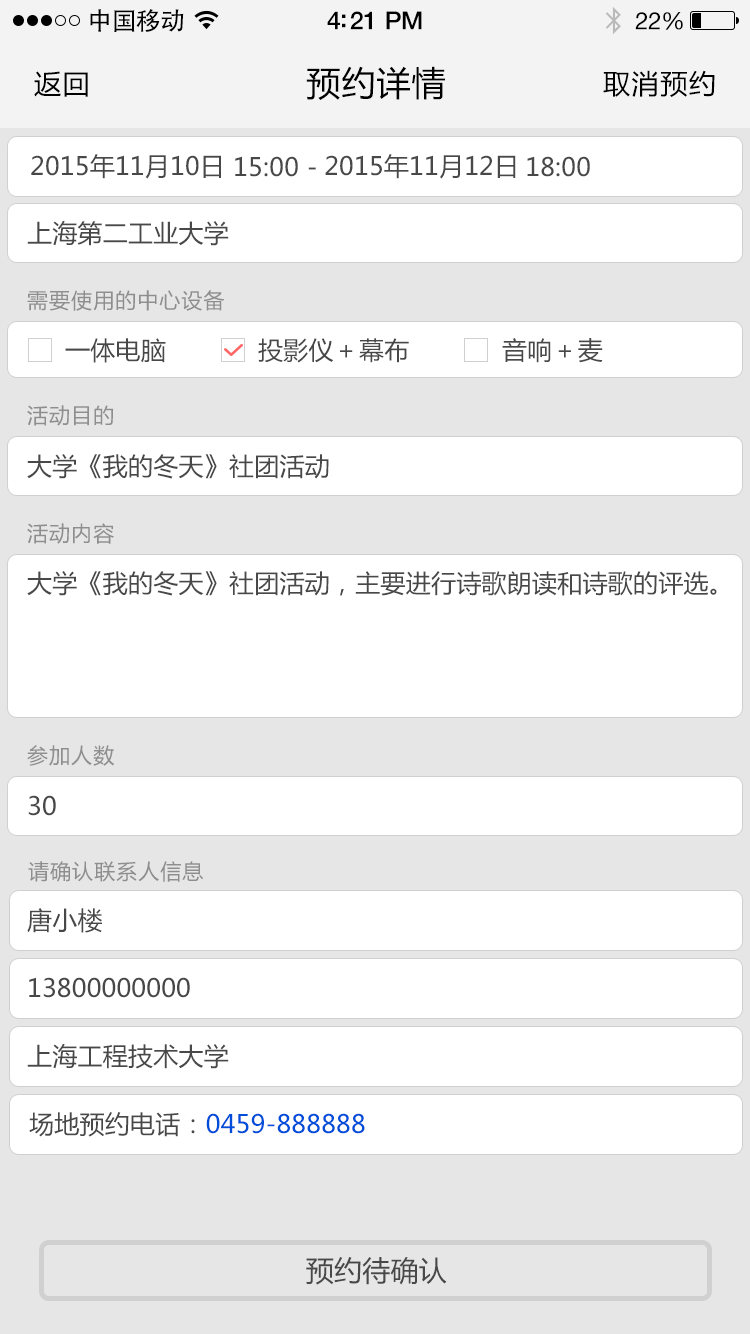
<style>
.page{position:relative;width:750px;height:1334px;background:#ffffff}
.page>*{position:absolute;margin:0}
.t1{font:25px "AdobeHeitiStd-Regular";letter-spacing:-0.025em;color:#000000}
.t2{font:25px "HelveticaNeue-Medium";letter-spacing:-0.02em;color:#000000}
.t3{font:24px "HelveticaNeue";letter-spacing:-0.02em;color:#000000}
.t4{font:27px "MicrosoftYaHei";letter-spacing:0.05em;color:#000000}
.t5{font:34px "MicrosoftYaHei";letter-spacing:0.03em;color:#000000}
.t6{font:25px "MicrosoftYaHei";letter-spacing:0.01em;color:#555555}
.t7{font:21px "MicrosoftYaHei";letter-spacing:0.05em;color:#8e8e8e}
.t8{font:25px "MicrosoftYaHei";letter-spacing:0.01em;color:#004dda}
.t9{font:25px "MicrosoftYaHei";letter-spacing:0.01em;color:#484848}
.t10{font:28px "MicrosoftYaHei";letter-spacing:0.01em;color:#484848}
</style>
<div class="page">
<p class="t1" style="left:90px;top:9px;width:94px;height:23px">中国移动</p>
<p class="t2" style="left:327px;top:11px;width:95px;height:19px">4:21 PM</p>
<p class="t3" style="left:635px;top:12px;width:48px;height:18px">22%</p>
<p class="t4" style="left:34px;top:71px;width:54px;height:26px">返回</p>
<p class="t5" style="left:306px;top:66px;width:139px;height:34px">预约详情</p>
<p class="t4" style="left:603px;top:70px;width:112px;height:27px">取消预约</p>
<p class="t6" style="left:31px;top:154px;width:190px;height:25px">2015年11月10日</p>
<p class="t6" style="left:235px;top:156px;width:81px;height:21px">15:00 -</p>
<p class="t6" style="left:325px;top:154px;width:191px;height:25px">2015年11月12日</p>
<p class="t6" style="left:527px;top:156px;width:63px;height:21px">18:00</p>
<p class="t6" style="left:27px;top:221px;width:202px;height:25px">上海第二工业大学</p>
<p class="t7" style="left:27px;top:290px;width:198px;height:21px">需要使用的中心设备</p>
<p class="t6" style="left:65px;top:338px;width:101px;height:25px">一体电脑</p>
<p class="t6" style="left:258px;top:338px;width:151px;height:25px">投影仪＋幕布</p>
<p class="t6" style="left:502px;top:338px;width:101px;height:25px">音响＋麦</p>
<p class="t7" style="left:27px;top:405px;width:87px;height:21px">活动目的</p>
<p class="t6" style="left:27px;top:454px;width:302px;height:25px">大学《我的冬天》社团活动</p>
<p class="t7" style="left:27px;top:523px;width:87px;height:21px">活动内容</p>
<p class="t6" style="left:27px;top:571px;width:690px;height:25px">大学《我的冬天》社团活动，主要进行诗歌朗读和诗歌的评选。</p>
<p class="t7" style="left:27px;top:745px;width:87px;height:21px">参加人数</p>
<p class="t6" style="left:28px;top:795px;width:28px;height:21px">30</p>
<p class="t7" style="left:28px;top:861px;width:175px;height:21px">请确认联系人信息</p>
<p class="t6" style="left:27px;top:908px;width:75px;height:25px">唐小楼</p>
<p class="t6" style="left:29px;top:977px;width:161px;height:21px">13800000000</p>
<p class="t6" style="left:27px;top:1044px;width:202px;height:25px">上海工程技术大学</p>
<p class="t8" style="left:29px;top:1112px;width:336px;height:25px"><span class="t9">场地预约电话：</span>0459-888888</p>
<p class="t10" style="left:306px;top:1257px;width:141px;height:28px">预约待确认</p>
</div>
